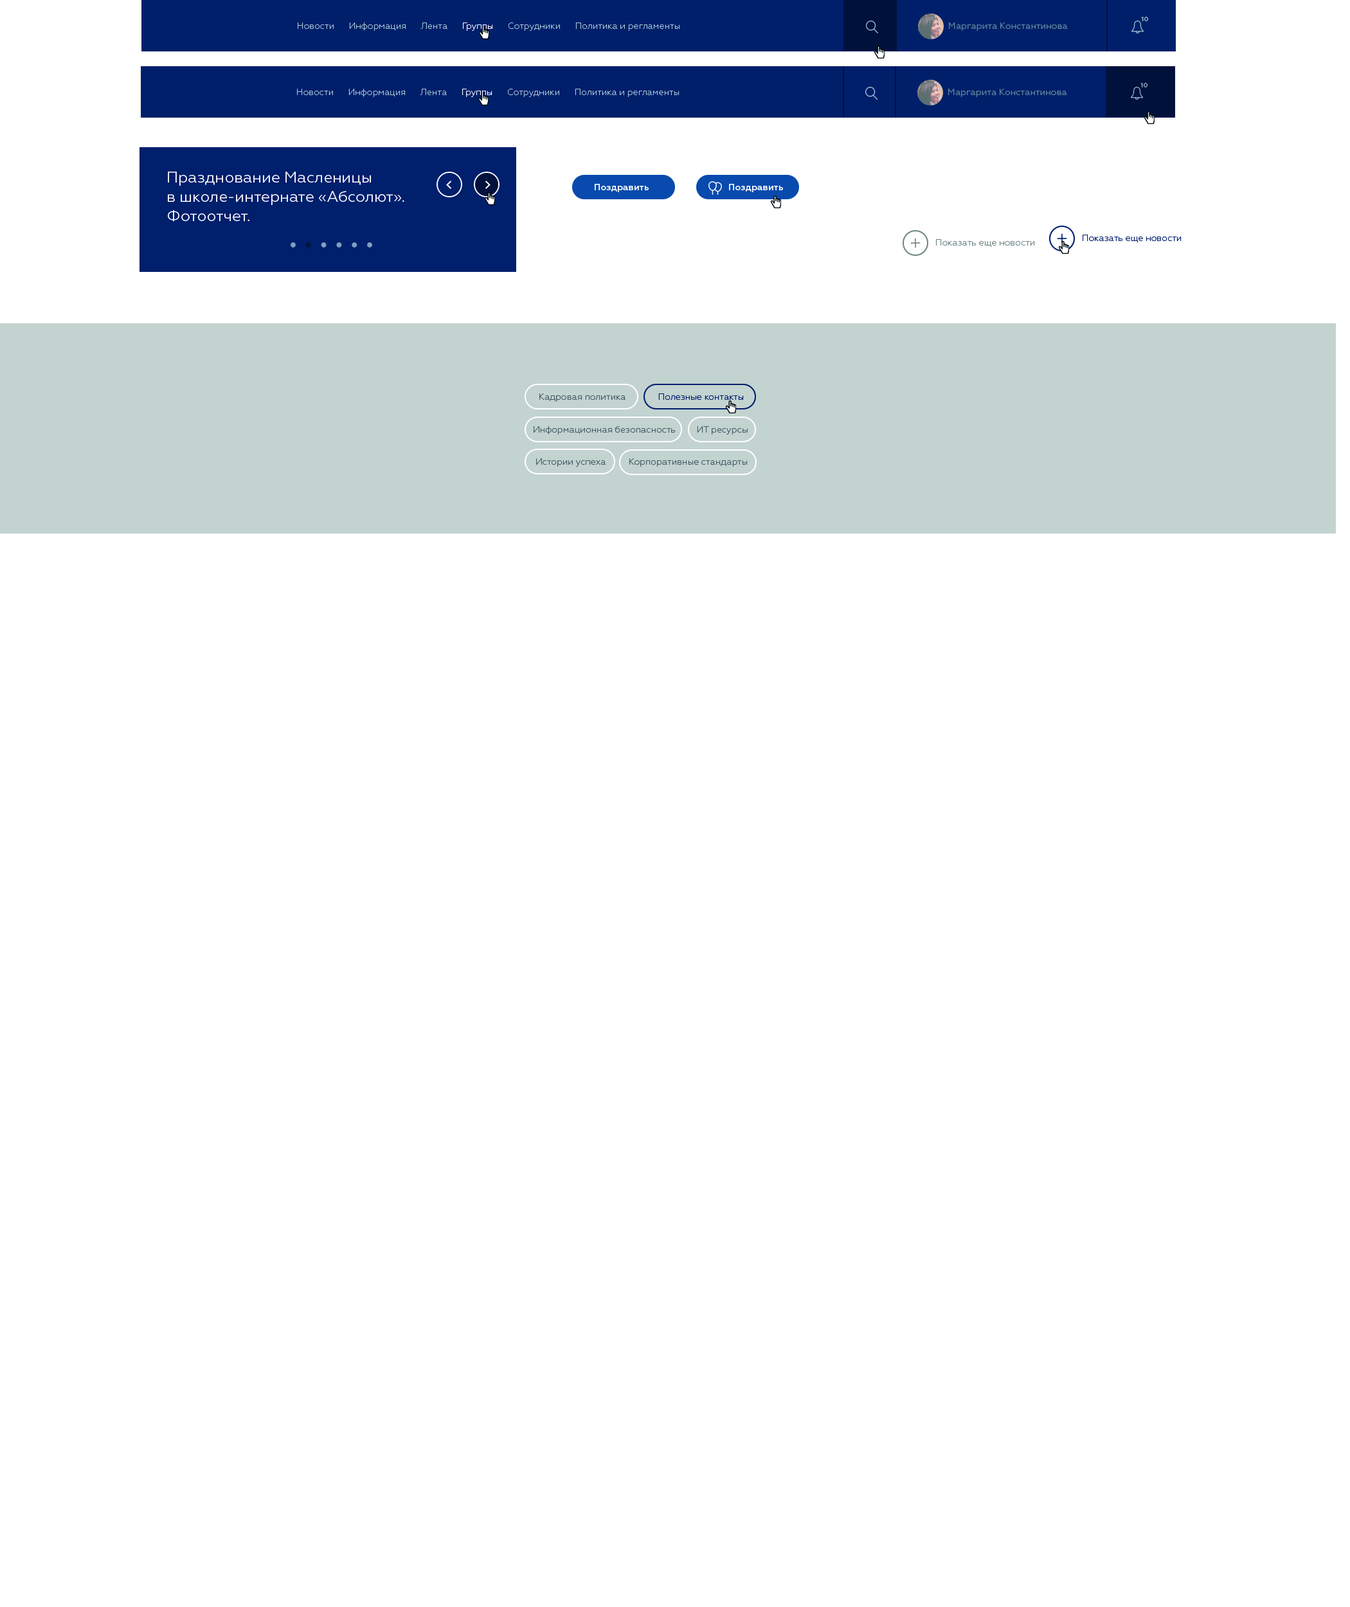
<style>
.page{position:relative;width:1350px;height:1607px;background:#ffffff}
.page>*{position:absolute;margin:0}
.t1{font:6.4px "Geometria-Medium";color:#aacad5}
.t2{font:9px "Geometria-Light";color:#aacbd5}
.t3{font:9px "Geometria-Light";color:#ffffff}
.t4{font:9px "Geometria";color:#618698}
.t5{font:15.4px/19.3px "Geometria";color:#ffffff}
.t6{font:9px "Geometria-Medium";letter-spacing:0.01em;color:#ffffff}
.t7{font:9px "Geometria-Light";color:#6f8585}
.t8{font:9px "Geometria-Light";color:#001f6c}
.t9{font:9px "Geometria-Light";color:#465d65}
</style>
<div class="page">
<p class="t1" style="left:1141px;top:17px;width:7px;height:4px">10</p>
<p class="t2" style="left:298px;top:22px;width:382px;height:9px">Новости      Информация      Лента      <span class="t3">Группы</span>      Сотрудники      Политика и регламенты</p>
<p class="t4" style="left:949px;top:22px;width:119px;height:9px">Маргарита Константинова</p>
<p class="t2" style="left:297px;top:89px;width:383px;height:8px">Новости      Информация      Лента      <span class="t3">Группы</span>      Сотрудники      Политика и регламенты</p>
<p class="t4" style="left:948px;top:89px;width:119px;height:8px">Маргарита Константинова</p>
<p class="t1" style="left:1140px;top:83px;width:8px;height:4px">10</p>
<p class="t5" style="left:168px;top:172px;width:236px;height:50px">Празднование Масленицы <br>в школе-интернате «Абсолют».<br>Фотоотчет.</p>
<p class="t6" style="left:595px;top:184px;width:54px;height:8px">Поздравить</p>
<p class="t6" style="left:729px;top:184px;width:54px;height:8px">Поздравить</p>
<p class="t7" style="left:936px;top:239px;width:99px;height:9px">Показать еще новости</p>
<p class="t8" style="left:1083px;top:235px;width:99px;height:8px">Показать еще новости</p>
<p class="t9" style="left:539px;top:393px;width:87px;height:9px">Кадровая политика</p>
<p class="t8" style="left:658px;top:393px;width:86px;height:7px">Полезные контакты</p>
<p class="t9" style="left:534px;top:426px;width:142px;height:9px">Информационная безопасность</p>
<p class="t9" style="left:697px;top:426px;width:51px;height:9px">ИТ ресурсы</p>
<p class="t9" style="left:536px;top:458px;width:70px;height:9px">Истории успеха</p>
<p class="t9" style="left:629px;top:458px;width:119px;height:9px">Корпоративные стандарты</p>
</div>
